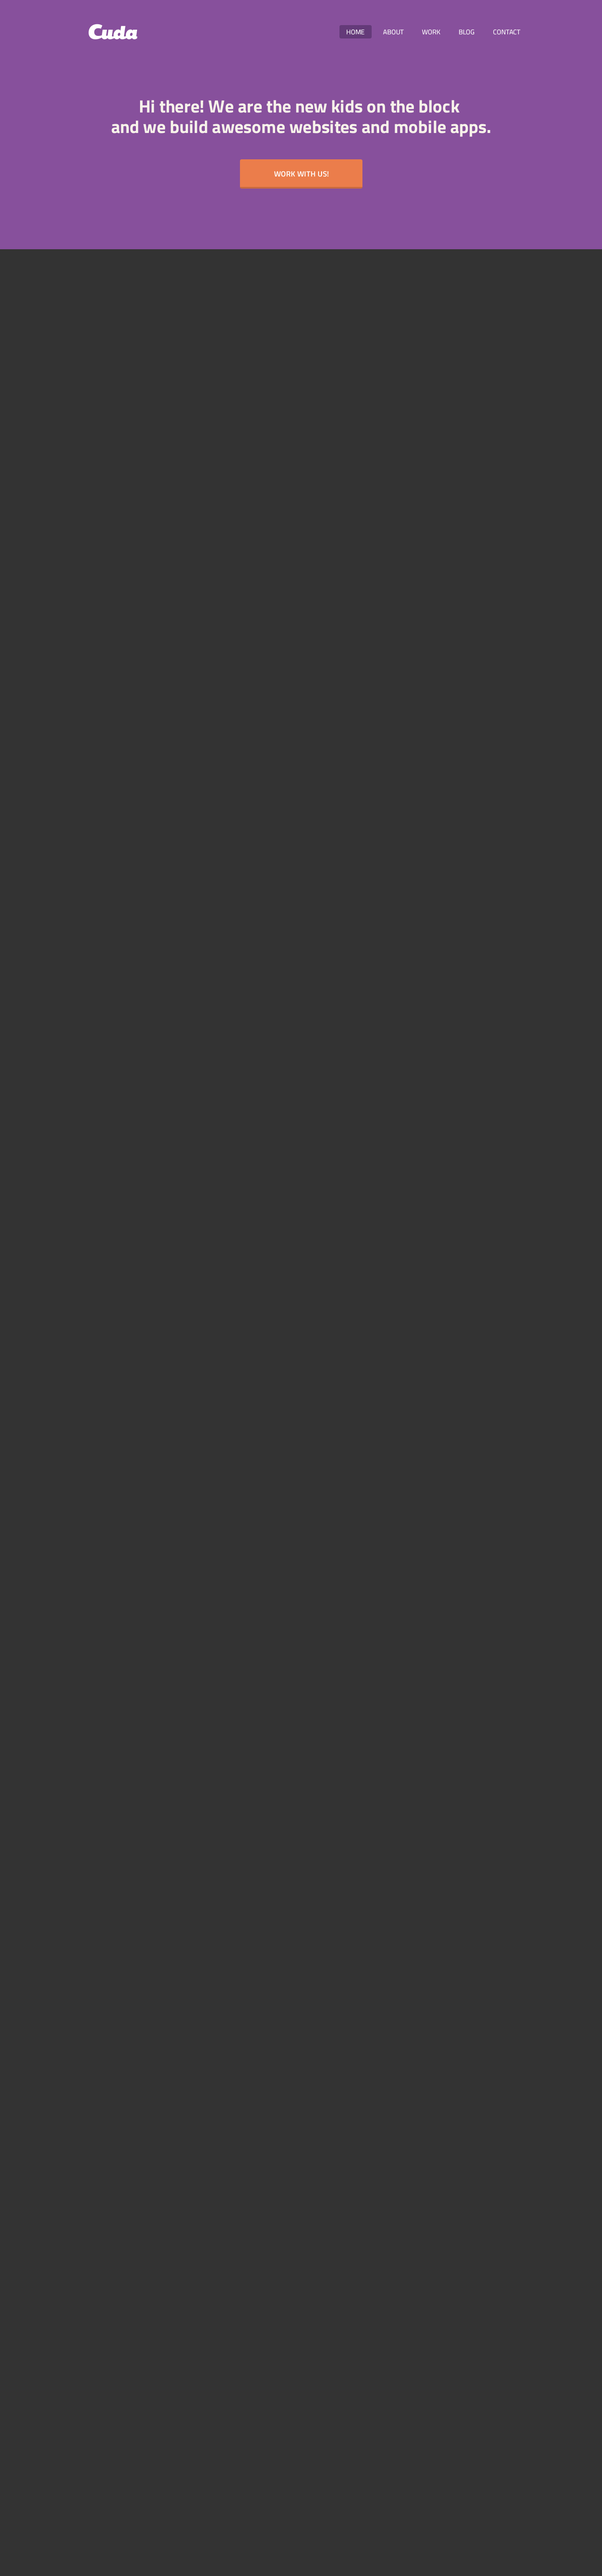
<style>
.page{position:relative;width:602px;height:2576px;background:#333333}
.page>*{position:absolute;margin:0}
.t1{font:6.7px "TitilliumWeb-Regular";color:#ffffff;text-transform:uppercase}
.t2{font:17.6px/20.4px "TitilliumWeb-Bold";color:#f7f3ea}
.t3{font:7.5px "TitilliumWeb-SemiBold";letter-spacing:0.02em;color:#ffffff}
</style>
<div class="page">
<p class="t1" style="left:347px;top:29px;width:174px;height:6px">Home           About           WORK           Blog           Contact</p>
<p class="t2" style="left:112px;top:100px;width:379px;height:37px;text-align:center">Hi there! We are the new kids on the block <br>and we build awesome websites and mobile apps.</p>
<p class="t3" style="left:274px;top:171px;width:55px;height:6px">WORK WITH US!</p>
</div>
